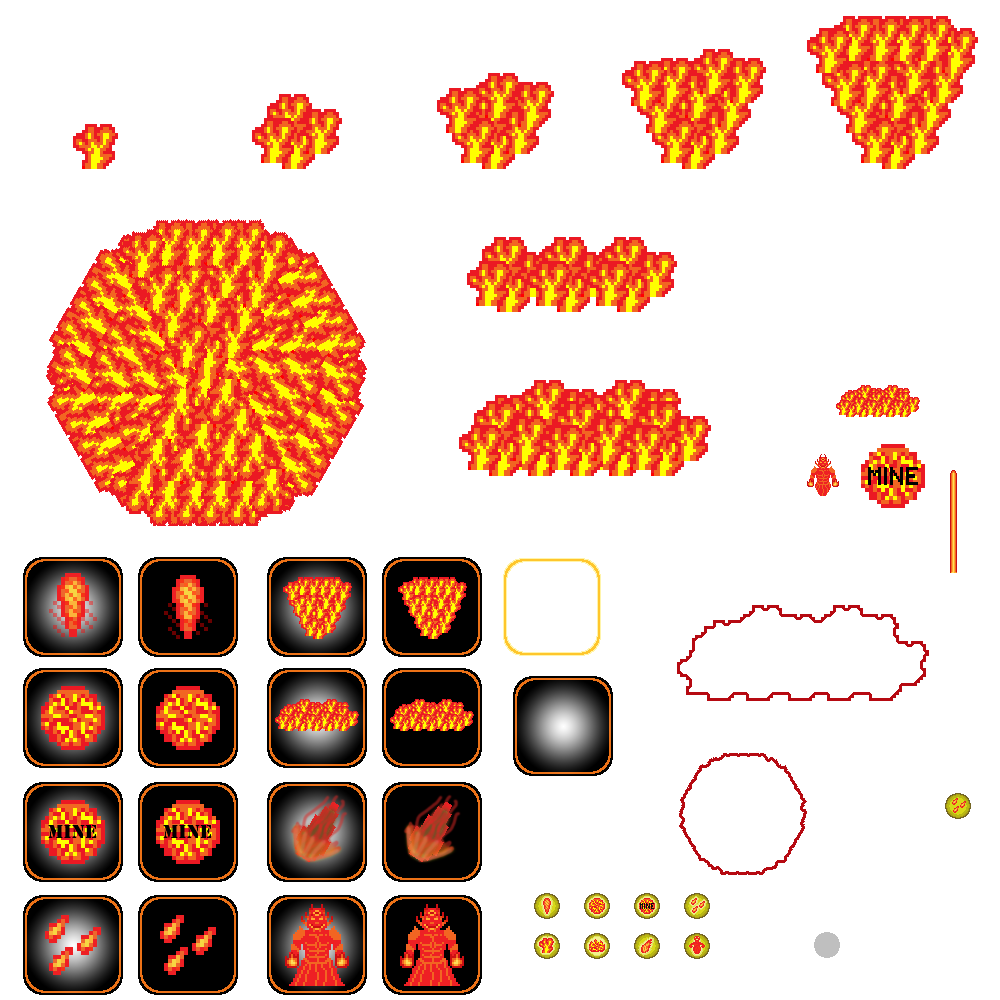
<style>
.page{position:relative;width:1000px;height:1000px;background:#ffffff}
.page>*{position:absolute;margin:0}
.t1{font:20px "Stencil";color:#000000}
</style>
<div class="page">
<p class="t1" style="left:48px;top:825px;width:49px;height:13px">mine</p>
<p class="t1" style="left:163px;top:825px;width:49px;height:13px">mine</p>
</div>
